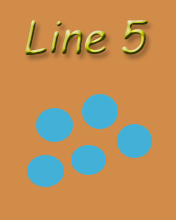
<style>
.page{position:relative;width:176px;height:220px;background:#d18c4a}
.page>*{position:absolute;margin:0}
.t1{font:43.5px "ComicSansMS";font-style:italic}
</style>
<div class="page">
<p class="t1" style="left:25px;top:20px;width:123px;height:35px">Line 5</p>
</div>
